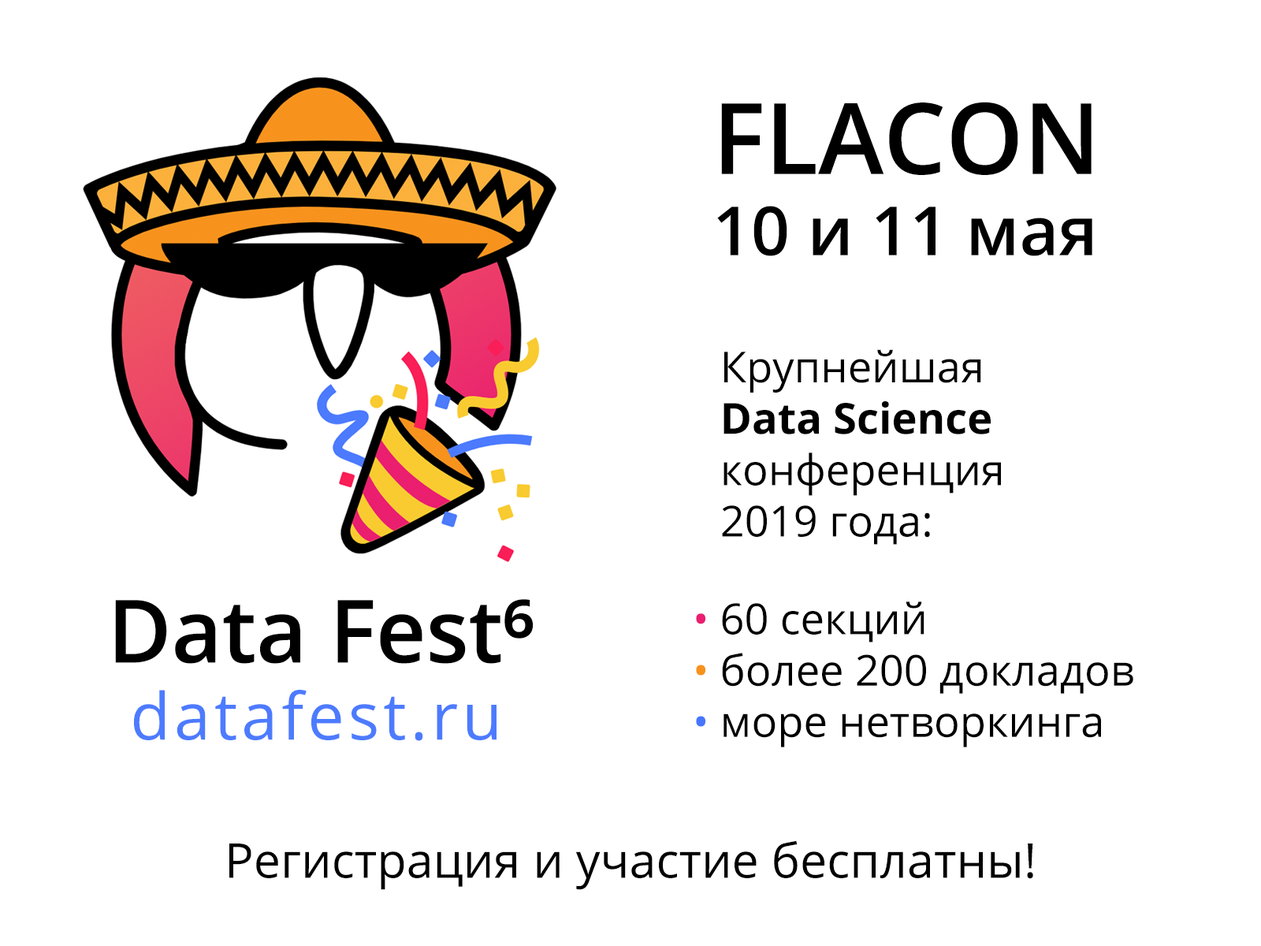
<style>
.page{position:relative;width:1261px;height:946px;background:#ffffff}
.page>*{position:absolute;margin:0}
.t1{font:67.8px "OpenSans-Semibold";color:#000000}
.t2{font:98.5px "OpenSans-Semibold";color:#000000}
.t3{font:42.8px "OpenSans";color:#000000}
.t4{font:42.8px "OpenSans-Bold";color:#000000}
.t5{font:87.2px "OpenSans-Semibold";color:#000000}
.t6{font:42.8px "OpenSans";color:#eb1e6f}
.t7{font:42.8px "OpenSans";color:#f7921d}
.t8{font:42.8px "OpenSans";color:#4676ff}
.t9{font:65.3px "OpenSans";letter-spacing:0.06em;color:#4d7bff}
.t10{font:48.1px "OpenSans";color:#000000}
</style>
<div class="page">
<p class="t1" style="left:717px;top:102px;width:375px;height:154px"><span class="t2">FLACON<br></span>10 и 11 мая</p>
<p class="t3" style="left:722px;top:349px;width:279px;height:196px">Крупнейшая <span class="t4">Data Science </span>конференция 2019 года:</p>
<p class="t5" style="left:115px;top:599px;width:419px;height:65px">Data Fest⁶</p>
<p class="t3" style="left:696px;top:601px;width:437px;height:146px"><span class="t6">• </span>60 секций<br><span class="t7">• </span>более 200 докладов<br><span class="t8">• </span>море нетворкинга</p>
<p class="t9" style="left:134px;top:690px;width:362px;height:51px">datafest.ru</p>
<p class="t10" style="left:229px;top:840px;width:804px;height:50px">Регистрация и участие бесплатны!</p>
</div>
